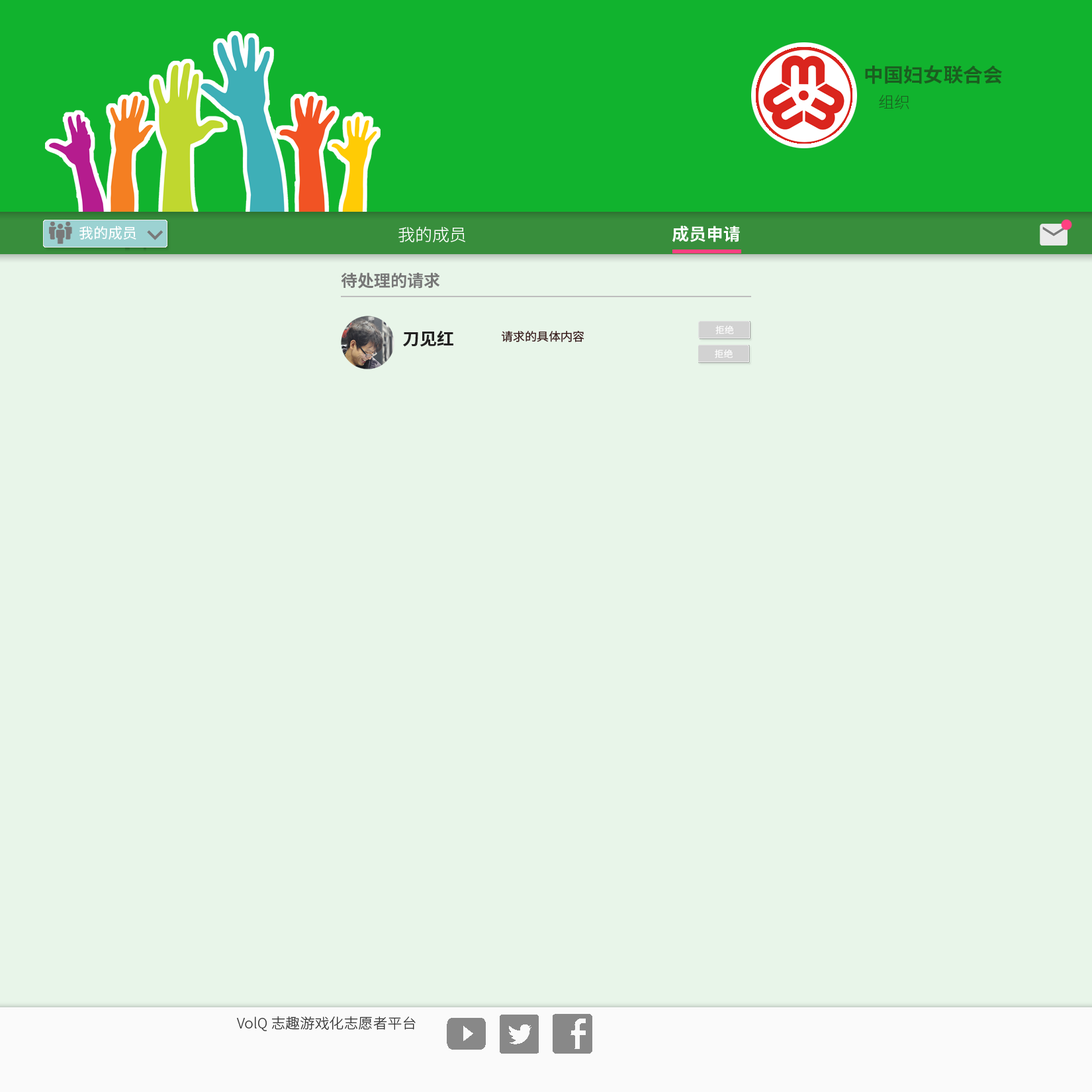
<style>
.page{position:relative;width:1092px;height:1092px;background:#e8f5e9}
.page>*{position:absolute;margin:0}
.t1{font:19.5px "NotoSansCJKsc-Bold";color:#1b5e20}
.t2{font:15.6px "NotoSansCJKsc-Thin";color:#1b5e20}
.t3{font:14.3px "NotoSansCJKsc-Regular";color:#ffffff}
.t4{font:16.9px "NotoSansCJKsc-Light";color:#ffffff}
.t5{font:16.9px "NotoSansCJKsc-Bold";color:#ffffff}
.t6{font:16.2px "NotoSansCJKsc-Bold";color:#777777}
.t7{font:16.9px "NotoSansCJKsc-Bold";color:#222121}
.t8{font:11.7px "NotoSansCJKsc-Regular";color:#391e1e}
.t9{font:14.3px "NotoSansCJKsc-Light";color:#353535}
</style>
<div class="page">
<p class="t1" style="left:865px;top:65px;width:138px;height:19px">中国妇女联合会</p>
<p class="t2" style="left:879px;top:95px;width:30px;height:14px">组织</p>
<p class="t3" style="left:79px;top:226px;width:57px;height:14px">我的成员</p>
<p class="t4" style="left:398px;top:226px;width:67px;height:17px">我的成员</p>
<p class="t5" style="left:672px;top:226px;width:68px;height:16px">成员申请</p>
<p class="t6" style="left:341px;top:273px;width:99px;height:16px">待处理的请求</p>
<p class="t7" style="left:403px;top:330px;width:50px;height:17px">刀见红</p>
<p class="t8" style="left:501px;top:330px;width:83px;height:12px">请求的具体内容</p>
<p class="t9" style="left:237px;top:1016px;width:179px;height:15px">VolQ 志趣游戏化志愿者平台</p>
</div>
